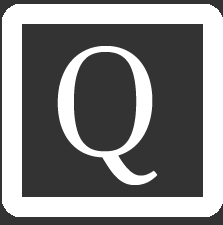
<style>
.page{position:relative;width:223px;height:225px;background:#333333}
.page>*{position:absolute;margin:0}
.t1{font:150px "JavaneseText";letter-spacing:0.035em;color:#ffffff}
</style>
<div class="page">
<p class="t1" style="left:57px;top:46px;width:101px;height:139px">Q</p>
</div>
